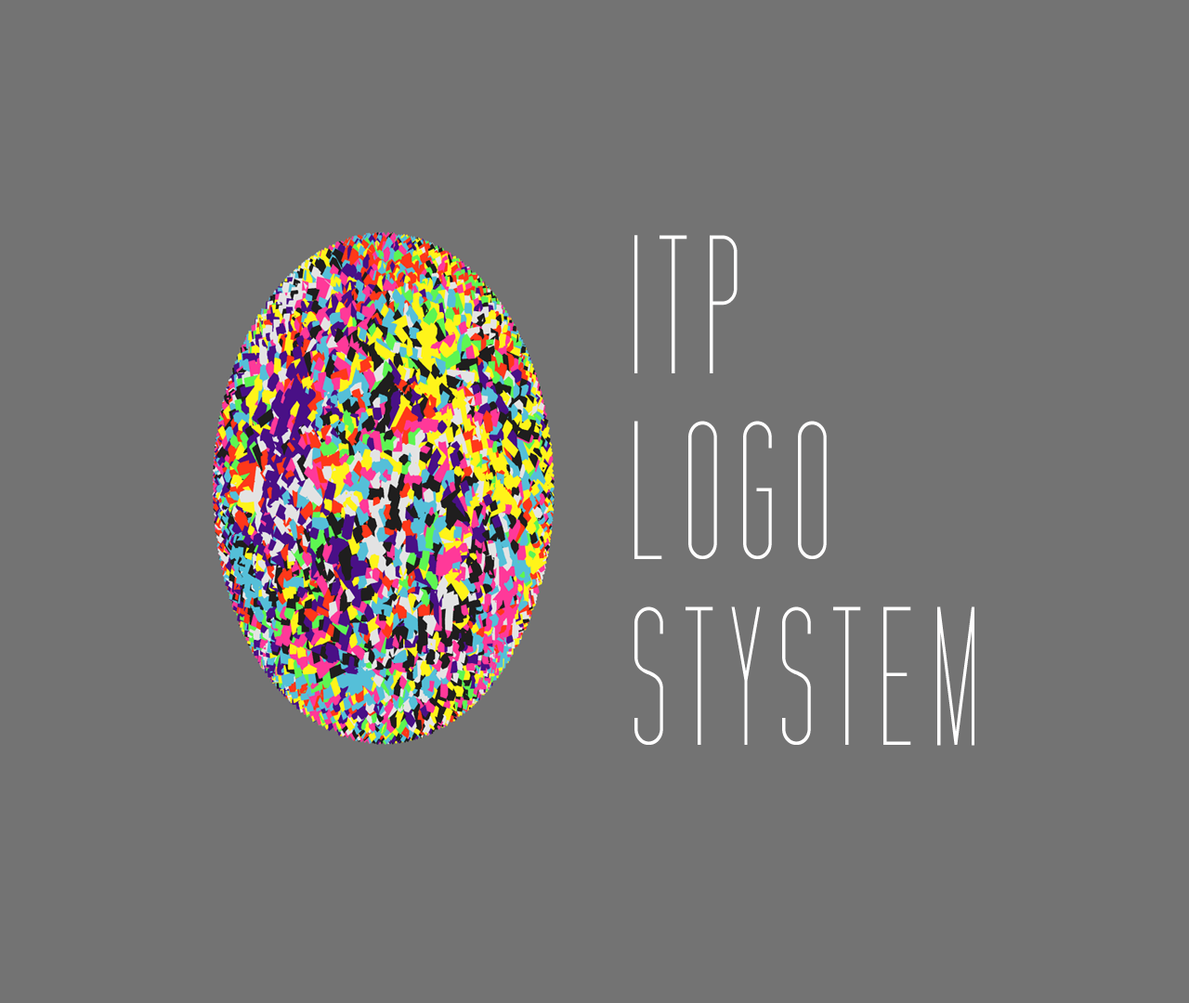
<style>
.page{position:relative;width:1189px;height:1003px;background:#737373}
.page>*{position:absolute;margin:0}
.t1{font:199.7px/185.8px "TallFilmsExpanded";letter-spacing:0.1em;color:#fffefe;scale:0.67 1}
</style>
<div class="page">
<p class="t1" style="left:634px;top:235px;width:340px;height:511px">ITP<br>LOGO<br>STYSTEM</p>
</div>
